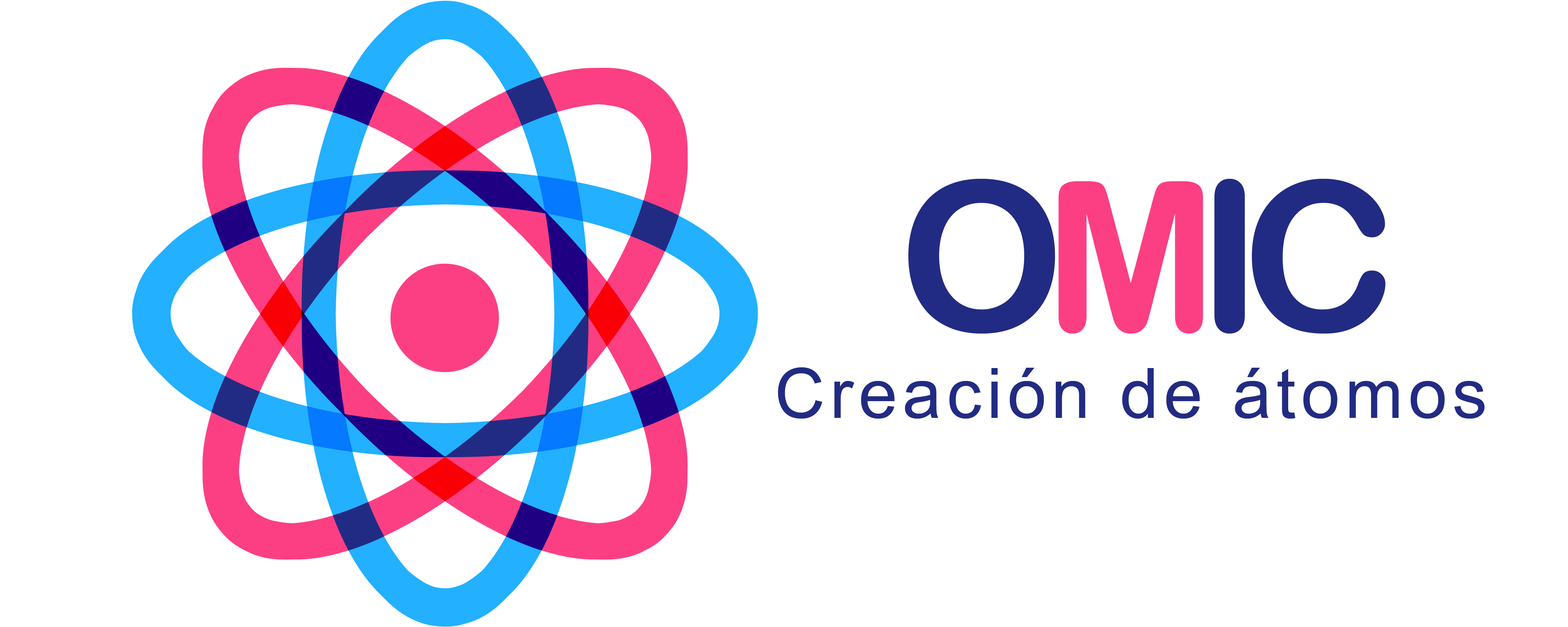
<style>
.page{position:relative;width:1568px;height:627px;background:#ffffff}
.page>*{position:absolute;margin:0}
.t1{font:209.1px "ArialRoundedMTBold";letter-spacing:-0.1em;color:#222b83}
.t2{font:209.1px "ArialRoundedMTBold";letter-spacing:-0.1em;color:#fc3f83}
.t3{font:69.7px "ArialMT";letter-spacing:0.075em;color:#222b83}
</style>
<div class="page">
<p class="t1" style="left:908px;top:179px;width:477px;height:154px">O<span class="t2">M</span>IC</p>
<p class="t3" style="left:778px;top:367px;width:707px;height:51px">Creación de átomos</p>
</div>
